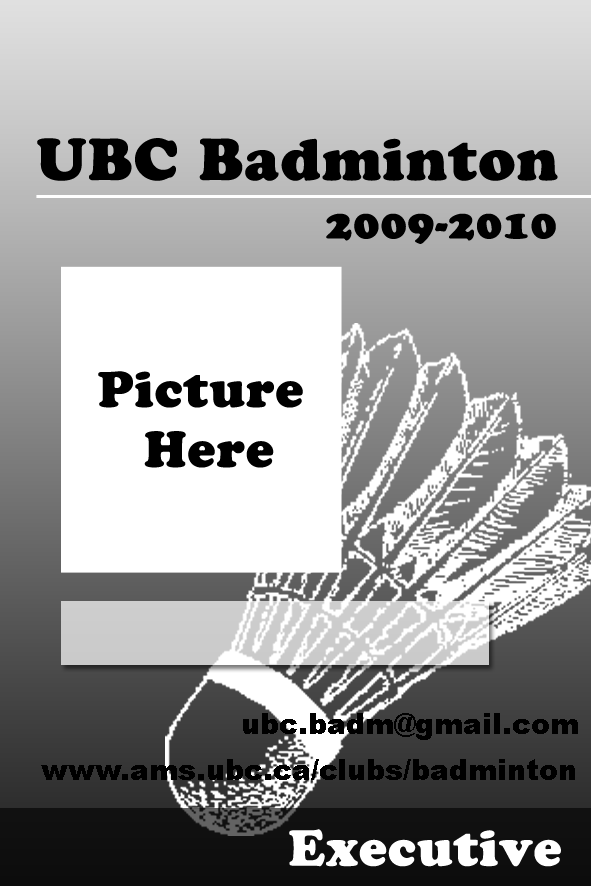
<style>
.page{position:relative;width:591px;height:886px}
.page>*{position:absolute;margin:0}
.t1{font:58.3px "CooperBlackStd";letter-spacing:0.025em;color:#000000}
.t2{font:41.7px "CooperBlackStd";letter-spacing:0.025em;color:#000000}
.t3{font:50px "CooperBlackStd";letter-spacing:0.025em;color:#000000}
.t4{font:29.2px "Arial-Black";color:#000000}
.t5{font:50px "CooperBlackStd";letter-spacing:0.025em;color:#ffffff}
</style>
<div class="page">
<p class="t1" style="left:37px;top:138px;width:521px;height:43px">UBC Badminton</p>
<p class="t2" style="left:326px;top:213px;width:230px;height:31px">2009-2010</p>
<p class="t3" style="left:98px;top:371px;width:205px;height:97px;text-align:center">Picture <br>Here</p>
<p class="t4" style="left:243px;top:713px;width:335px;height:27px">ubc.badm@gmail.com</p>
<p class="t4" style="left:41px;top:759px;width:534px;height:21px">www.ams.ubc.ca/clubs/badminton</p>
<p class="t5" style="left:289px;top:829px;width:272px;height:38px">Executive</p>
</div>
